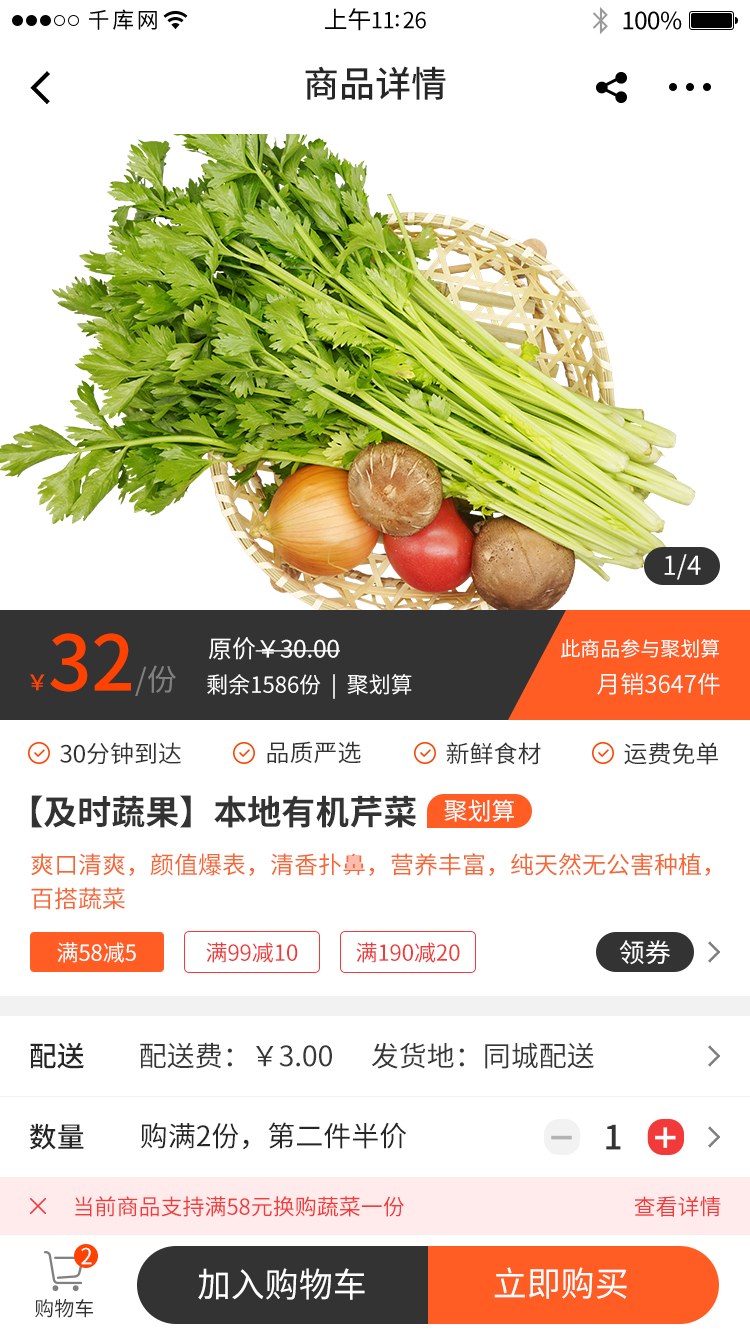
<style>
.page{position:relative;width:750px;height:1334px;background:#ffffff}
.page>*{position:absolute;margin:0}
.t1{font:22px "SourceHanSansCN-Regular";letter-spacing:0.12em;color:#030303}
.t2{font:22px "SourceHanSansCN-Regular";letter-spacing:-0.02em;color:#030303}
.t3{font:24px "SourceHanSansCN-Regular";letter-spacing:-0.02em;color:#030303}
.t4{font:36px "SourceHanSansCN-Medium";color:#262626}
.t5{font:26px "SourceHanSansCN-Regular";color:#fffefe}
.t6{font:76px "SourceHanSansCN-Medium";color:#ff4200}
.t7{font:22px "SourceHanSansCN-Medium";color:#ff4200}
.t8{font:30px "SourceHanSansCN-Regular";color:#808080}
.t9{font:24px "SourceHanSansCN-Regular";color:#fffefe}
.t10{font:20px "SourceHanSansCN-Regular";color:#ffffff}
.t11{font:22px "SourceHanSansCN-Regular";color:#ffffff}
.t12{font:24px "SourceHanSansCN-Normal";color:#ffffff}
.t13{font:24px "SourceHanSansCN-Regular";color:#333333}
.t14{font:34px "SourceHanSansCN-Bold";color:#333333}
.t15{font:24px "SourceHanSansCN-Regular";color:#ffffff}
.t16{font:24px/34px "SourceHanSansCN-Regular";color:#f76734}
.t17{font:22px "SourceHanSansCN-Regular";color:#f23a3a}
.t18{font:26px "SourceHanSansCN-Regular";color:#ffffff}
.t19{font:28px "SourceHanSansCN-Medium";color:#262626}
.t20{font:28px "SourceHanSansCN-Regular";color:#383838}
.t21{font:28px "SourceHanSansCN-Regular";color:#262626}
.t22{font:33.6px "SourceHanSansCN-Medium";color:#333333}
.t23{font:22px "SourceHanSansCN-Regular";color:#f33b3b}
.t24{font:34px "SourceHanSansCN-Regular";color:#ffffff}
.t25{font:20px "SourceHanSansCN-Regular";color:#323232}
</style>
<div class="page">
<p class="t1" style="left:89px;top:9px;width:68px;height:21px">千库网</p>
<p class="t2" style="left:325px;top:8px;width:101px;height:23px"><span class="t3">上午</span>11:26</p>
<p class="t3" style="left:623px;top:11px;width:59px;height:19px">100%</p>
<p class="t4" style="left:305px;top:66px;width:141px;height:34px">商品详情</p>
<p class="t5" style="left:664px;top:554px;width:37px;height:26px">1/4</p>
<p class="t6" style="left:30px;top:633px;width:146px;height:63px"><span class="t7">￥</span>32<span class="t8">/份</span></p>
<p class="t9" style="left:209px;top:637px;width:131px;height:23px">原价￥30.00</p>
<p class="t10" style="left:561px;top:639px;width:158px;height:19px">此商品参与聚划算</p>
<p class="t11" style="left:207px;top:674px;width:205px;height:25px">剩余1586份  |  聚划算</p>
<p class="t12" style="left:597px;top:672px;width:123px;height:23px">月销3647件</p>
<p class="t13" style="left:60px;top:742px;width:121px;height:23px">30分钟到达</p>
<p class="t13" style="left:267px;top:741px;width:94px;height:23px">品质严选</p>
<p class="t13" style="left:446px;top:742px;width:95px;height:23px">新鲜食材</p>
<p class="t13" style="left:624px;top:742px;width:94px;height:23px">运费免单</p>
<p class="t14" style="left:31px;top:795px;width:386px;height:33px">【及时蔬果】本地有机芹菜</p>
<p class="t15" style="left:444px;top:799px;width:70px;height:23px">聚划算</p>
<p class="t16" style="left:31px;top:853px;width:679px;height:57px">爽口清爽，颜值爆表，清香扑鼻，营养丰富，纯天然无公害种植，<br>百搭蔬菜</p>
<p class="t11" style="left:57px;top:942px;width:79px;height:21px">满58减5</p>
<p class="t17" style="left:206px;top:942px;width:92px;height:21px">满99减10</p>
<p class="t17" style="left:356px;top:942px;width:104px;height:21px">满190减20</p>
<p class="t18" style="left:619px;top:940px;width:51px;height:25px">领券</p>
<p class="t19" style="left:30px;top:1042px;width:54px;height:27px">配送</p>
<p class="t20" style="left:140px;top:1042px;width:454px;height:27px">配送费：￥3.00      发货地：同城配送</p>
<p class="t19" style="left:29px;top:1123px;width:55px;height:27px">数量</p>
<p class="t21" style="left:140px;top:1122px;width:267px;height:28px">购满2份，第二件半价</p>
<p class="t22" style="left:606px;top:1124px;width:15px;height:26px">1</p>
<p class="t23" style="left:75px;top:1196px;width:329px;height:21px">当前商品支持满58元换购蔬菜一份</p>
<p class="t23" style="left:634px;top:1196px;width:87px;height:21px">查看详情</p>
<p class="t11" style="left:81px;top:1247px;width:11px;height:18px">2</p>
<p class="t24" style="left:198px;top:1268px;width:167px;height:32px">加入购物车</p>
<p class="t24" style="left:494px;top:1267px;width:133px;height:32px">立即购买</p>
<p class="t25" style="left:35px;top:1299px;width:58px;height:19px">购物车</p>
</div>
